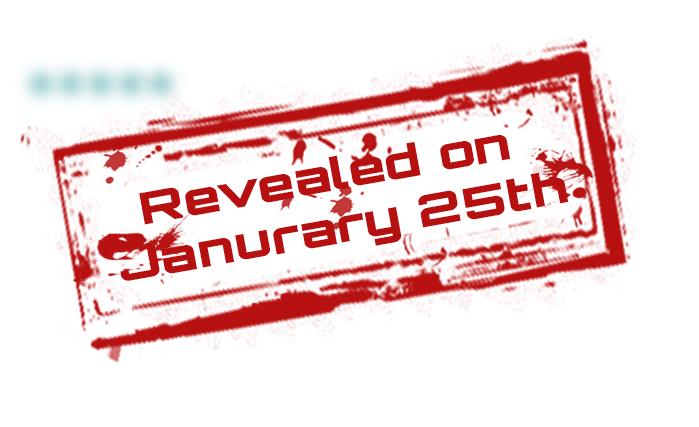
<style>
.page{position:relative;width:699px;height:427px;background:#ffffff}
.page>*{position:absolute;margin:0}
.t1{font:43.9px "Orbitron-Black";color:#b71010;scale:1.23 1}
</style>
<div class="page">
<p class="t1" style="left:120px;top:135px;width:449px;height:146px;text-align:center;rotate:-10deg">Revealed on <br>Janurary 25th</p>
</div>
